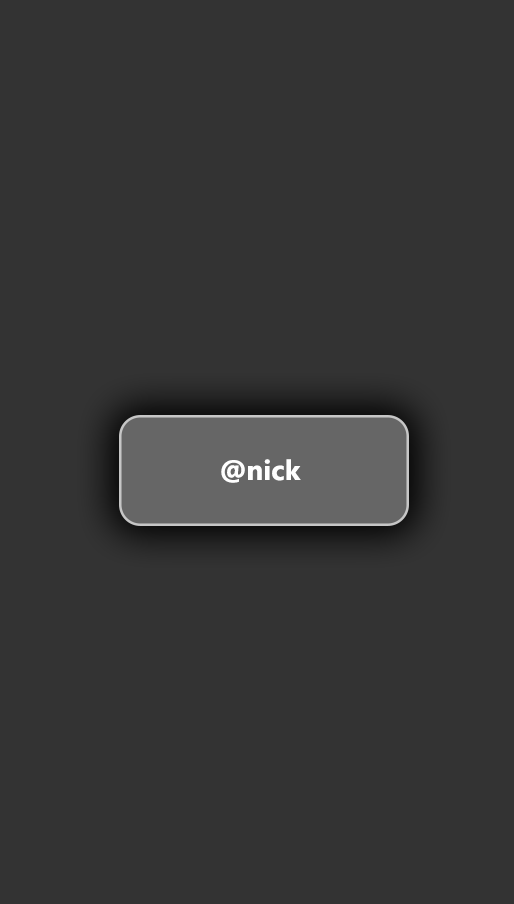
<style>
.page{position:relative;width:514px;height:904px;background:#333333}
.page>*{position:absolute;margin:0}
.t1{font:28px "MicrosoftNewTaiLue-Bold";color:#ffffff}
</style>
<div class="page">
<p class="t1" style="left:221px;top:459px;width:80px;height:24px">@nick</p>
</div>
